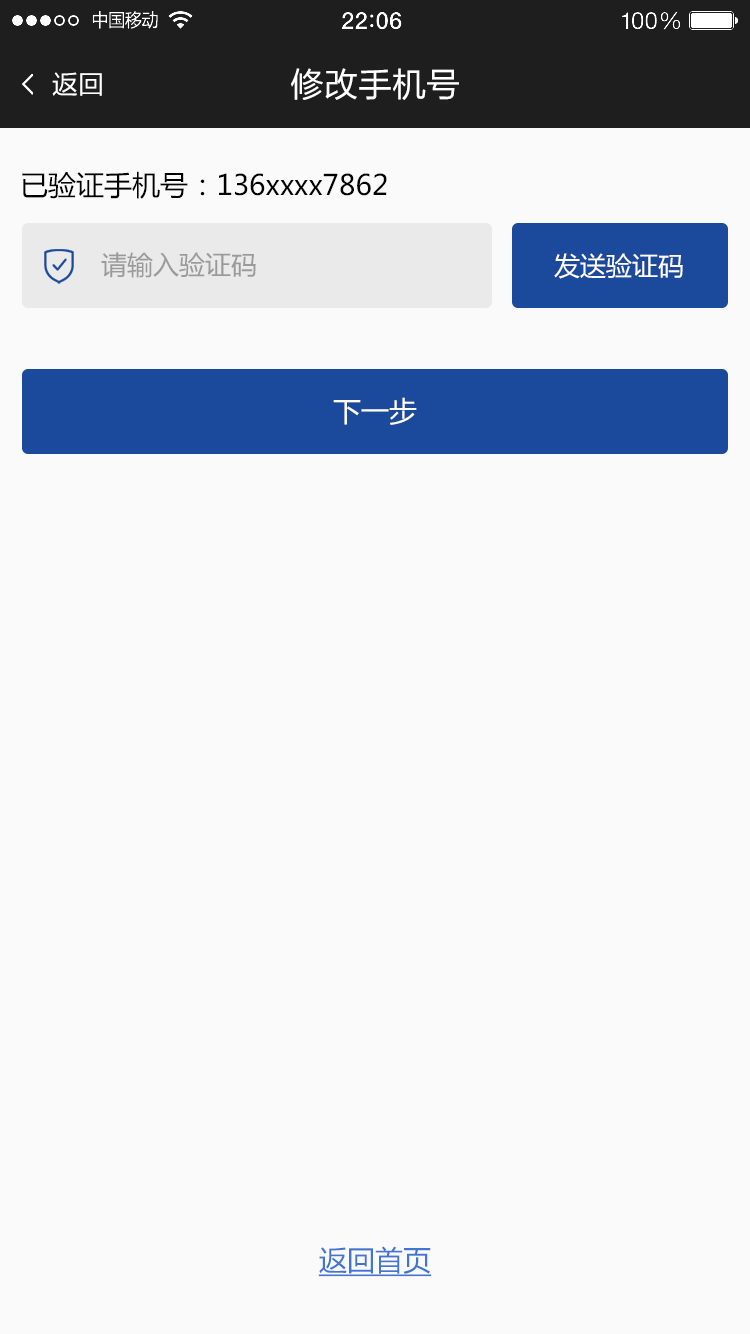
<style>
.page{position:relative;width:750px;height:1334px;background:#fafafa}
.page>*{position:absolute;margin:0}
.t1{font:26px "FZLTHJW--GB1-0";color:#ffffff}
.t2{font:34px "FZLTHJW--GB1-0";color:#ffffff}
.t3{font:28px "MicrosoftYaHei";color:#000000}
.t4{font:26px "MicrosoftYaHei";color:#9a9a9a}
.t5{font:26px "MicrosoftYaHei";color:#ffffff}
.t6{font:28px "MicrosoftYaHei";color:#ffffff}
.t7{font:28px "MicrosoftYaHei";color:#4275d1;text-decoration:underline}
</style>
<div class="page">
<p class="t1" style="left:52px;top:72px;width:50px;height:24px">返回</p>
<p class="t2" style="left:291px;top:68px;width:168px;height:32px">修改手机号</p>
<p class="t3" style="left:22px;top:171px;width:365px;height:28px">已验证手机号：136xxxx7862</p>
<p class="t4" style="left:101px;top:252px;width:155px;height:26px">请输入验证码</p>
<p class="t5" style="left:554px;top:253px;width:129px;height:26px">发送验证码</p>
<p class="t6" style="left:333px;top:397px;width:84px;height:28px">下一步</p>
<p class="t7" style="left:318px;top:1246px;width:114px;height:31px">返回首页</p>
</div>
